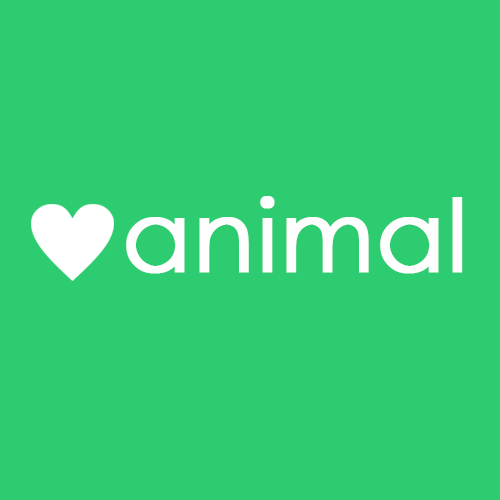
<style>
.page{position:relative;width:500px;height:500px;background:#2ecc71}
.page>*{position:absolute;margin:0}
.t1{font:100px "CenturyGothic";color:#fefefe;font-weight:bold}
</style>
<div class="page">
<p class="t1" style="left:126px;top:196px;width:337px;height:78px">animal</p>
</div>
